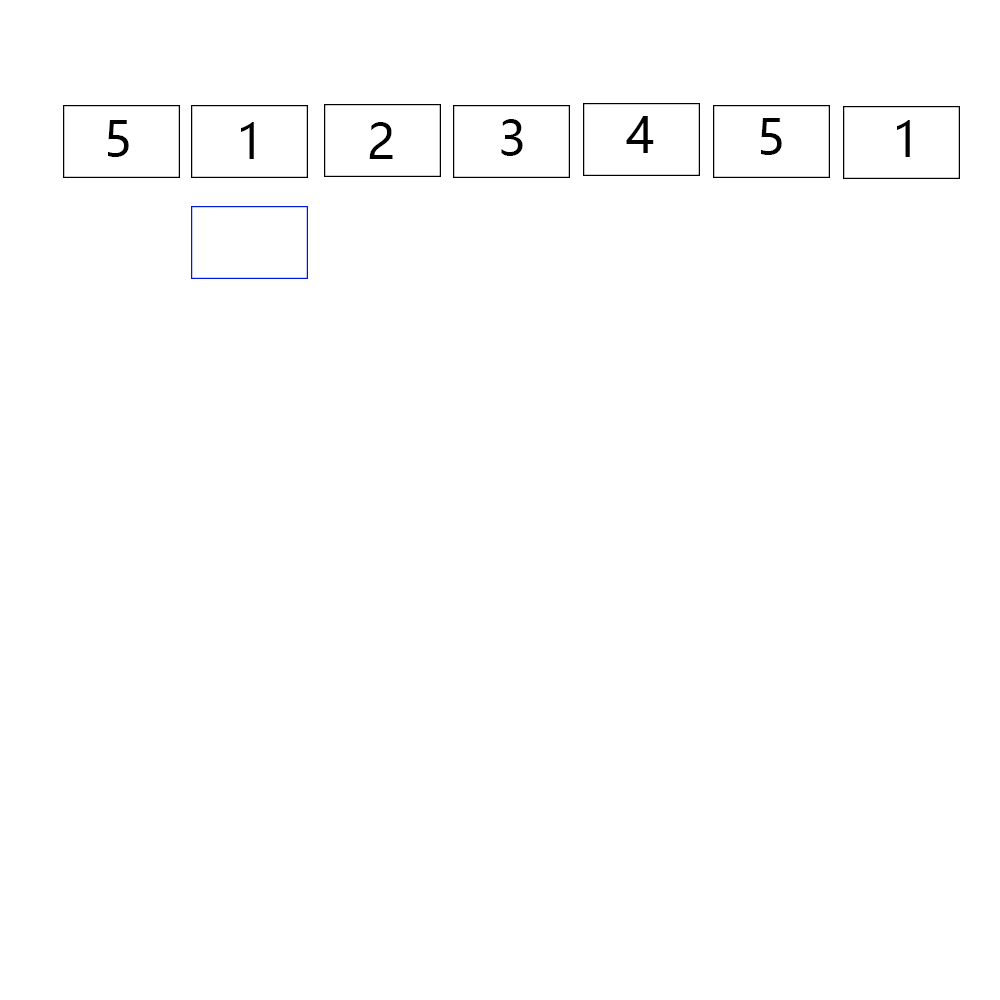
<style>
.page{position:relative;width:1000px;height:1000px;background:#ffffff}
.page>*{position:absolute;margin:0}
.t1{font:48px "MicrosoftYaHei";color:#000000}
</style>
<div class="page">
<p class="t1" style="left:108px;top:120px;width:21px;height:37px">5</p>
<p class="t1" style="left:241px;top:122px;width:13px;height:37px">1</p>
<p class="t1" style="left:369px;top:122px;width:24px;height:37px">2</p>
<p class="t1" style="left:501px;top:119px;width:22px;height:37px">3</p>
<p class="t1" style="left:626px;top:116px;width:28px;height:37px">4</p>
<p class="t1" style="left:761px;top:118px;width:21px;height:37px">5</p>
<p class="t1" style="left:897px;top:120px;width:13px;height:37px">1</p>
</div>
